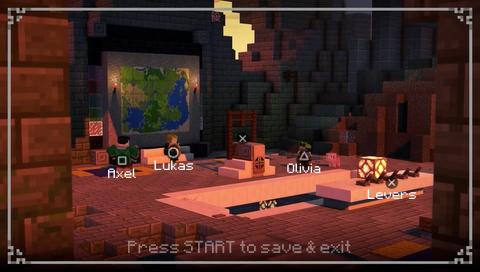
<style>
.page{position:relative;width:480px;height:272px}
.page>*{position:absolute;margin:0}
.t1{font:11px "Minecraft";color:#ffffff}
.t2{font:14px "Minecraft";color:#907674}
</style>
<div class="page">
<p class="t1" style="left:154px;top:160px;width:40px;height:10px">Lukas</p>
<p class="t1" style="left:108px;top:168px;width:28px;height:10px">Axel</p>
<p class="t1" style="left:287px;top:163px;width:34px;height:10px">Olivia</p>
<p class="t1" style="left:367px;top:189px;width:49px;height:10px">Levers</p>
<p class="t2" style="left:128px;top:240px;width:223px;height:13px">Press START to save &amp; exit</p>
</div>
